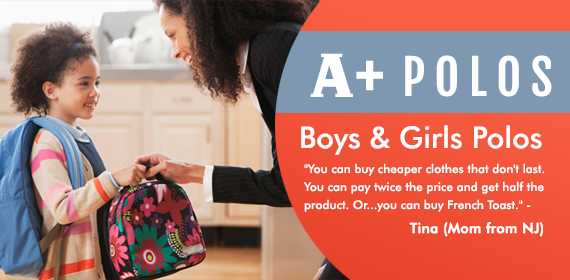
<style>
.page{position:relative;width:570px;height:280px}
.page>*{position:absolute;margin:0}
.t1{font:60px "FHANicholsonFrenchNormalNCV";color:#ffffff}
.t2{font:72px "FjallaOne-Regular";color:#ffffff}
.t3{font:48px "FjallaOne-Regular";letter-spacing:0.2em;color:#ffffff}
.t4{font:30px "FuturaBT-Medium";color:#ffffff}
.t5{font:12px/18px "FuturaBT-Medium";color:#ffffff}
.t6{font:14px "FuturaBT-Medium";color:#ffffff;font-weight:bold}
</style>
<div class="page">
<p class="t1" style="left:310px;top:53px;width:43px;height:44px">A</p>
<p class="t2" style="left:356px;top:60px;width:27px;height:31px">+</p>
<p class="t3" style="left:405px;top:55px;width:147px;height:42px">POLOS</p>
<p class="t4" style="left:301px;top:125px;width:241px;height:30px">Boys &amp; Girls Polos</p>
<p class="t5" style="left:303px;top:163px;width:242px;height:49px">"You can buy cheaper clothes that don't last. <br>You can pay twice the price and get half the <br>product. Or...you can buy French Toast." -</p>
<p class="t6" style="left:409px;top:222px;width:134px;height:15px">Tina (Mom from NJ)</p>
</div>
